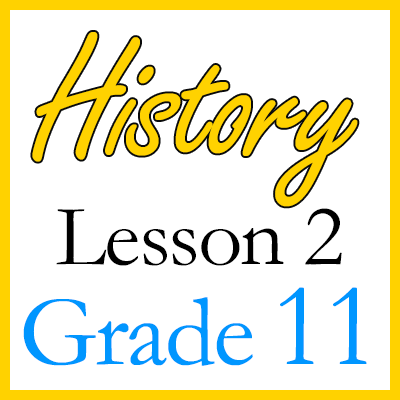
<style>
.page{position:relative;width:400px;height:400px;background:#ffffff}
.page>*{position:absolute;margin:0}
.t1{font:180.6px "FreestyleScript-Regular";letter-spacing:-0.025em;color:#ffd200}
.t2{font:87.5px/100px "Garamond";letter-spacing:-0.025em;color:#000000}
.t3{font:101.4px/100px "Garamond";letter-spacing:-0.025em;color:#0096ff}
.t4{font:120.8px/100px "Garamond";letter-spacing:-0.025em;color:#0096ff}
</style>
<div class="page">
<p class="t1" style="left:32px;top:32px;width:326px;height:175px">History</p>
<p class="t2" style="left:23px;top:208px;width:344px;height:158px;text-align:center">Lesson 2<br><span class="t3">Grade </span><span class="t4">11</span></p>
</div>
